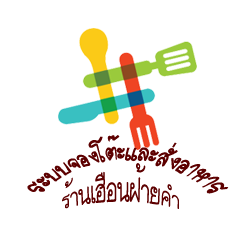
<style>
.page{position:relative;width:250px;height:250px;background:#ffffff}
.page>*{position:absolute;margin:0}
.t1{font:18.7px "2547_Ddinya-05";color:#5d0000}
.t2{font:29.3px "4804_KwangMD_PukluK";color:#5d0000}
</style>
<div class="page">
<p class="t1" style="left:27px;top:135px;width:202px;height:59px">ระบบจองโต๊ะและสั่งอาหาร</p>
<p class="t2" style="left:62px;top:163px;width:117px;height:46px">ร้านเฮือนฝ้ายคำ</p>
</div>
